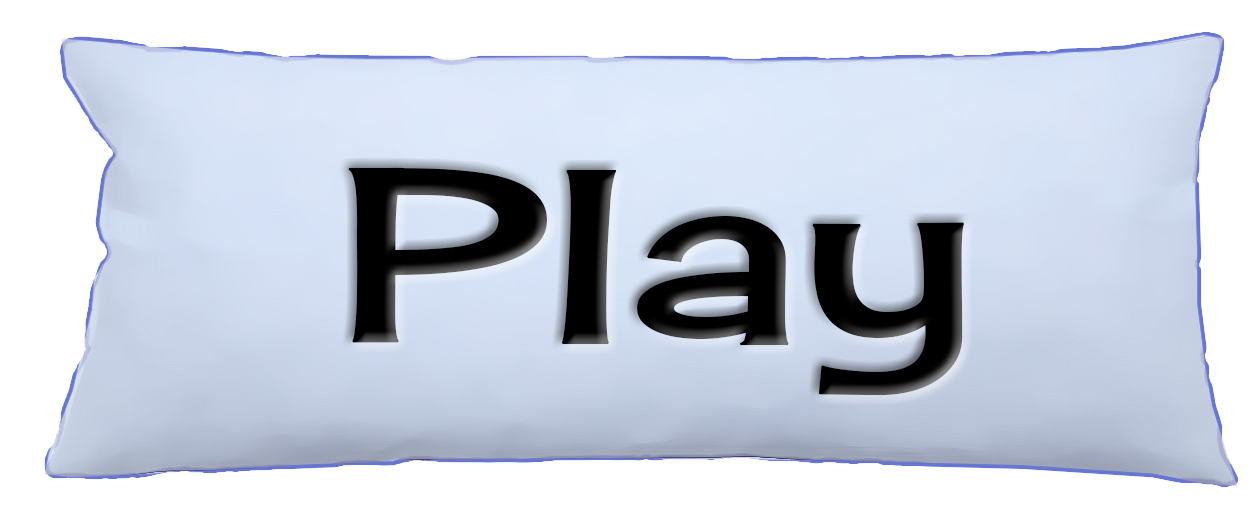
<style>
.page{position:relative;width:1260px;height:520px;background:#ffffff}
.page>*{position:absolute;margin:0}
.t1{font:239.5px "CherryCreamSoda";color:#000000;font-weight:bold;scale:1.1 1}
</style>
<div class="page">
<p class="t1" style="left:348px;top:167px;width:617px;height:229px">Play</p>
</div>
